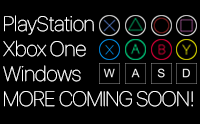
<style>
.page{position:relative;width:200px;height:124px;background:#000000}
.page>*{position:absolute;margin:0}
.t1{font:20.8px "SFUIDisplay-Ultralight";color:#ffffff}
</style>
<div class="page">
<p class="t1" style="left:3px;top:15px;width:190px;height:92px">PlayStation<br>Xbox One<br>Windows<br>MORE COMING SOON!</p>
</div>
